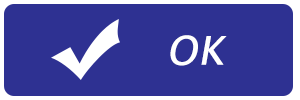
<style>
.page{position:relative;width:300px;height:100px;background:#2e3192}
.page>*{position:absolute;margin:0}
.t1{font:39px "LucidaSansUnicode";color:#ffffff;text-transform:uppercase;font-weight:bold;font-style:italic}
.t2{font:18px "Tahoma";color:#ffffff}
</style>
<div class="page">
<p class="t1" style="left:170px;top:35px;width:57px;height:31px"><span class="t2"><br></span>       OK</p>
</div>
